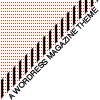
<style>
.page{position:relative;width:100px;height:100px;background:#ffffff}
.page>*{position:absolute;margin:0}
.t1{font:7.8px "Helvetica"}
</style>
<div class="page">
<p class="t1" style="left:9px;top:6px;width:90px;height:94px;rotate:-46deg">A WORDRESS MAGAZINE THEME</p>
</div>
